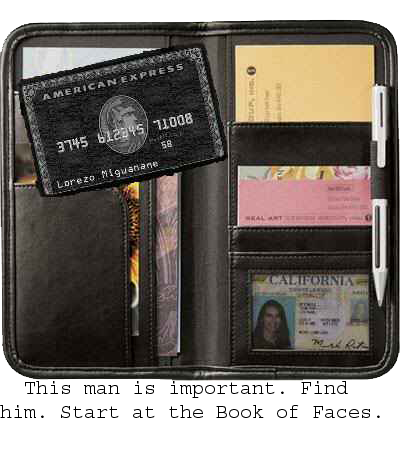
<style>
.page{position:relative;width:400px;height:450px;background:#ffffff}
.page>*{position:absolute;margin:0}
.t1{font:20px "Courier";color:#000000}
</style>
<div class="page">
<p class="t1" style="left:0px;top:381px;width:380px;height:37px">This man is important. Find<br>him. Start at the Book of Faces.</p>
</div>
